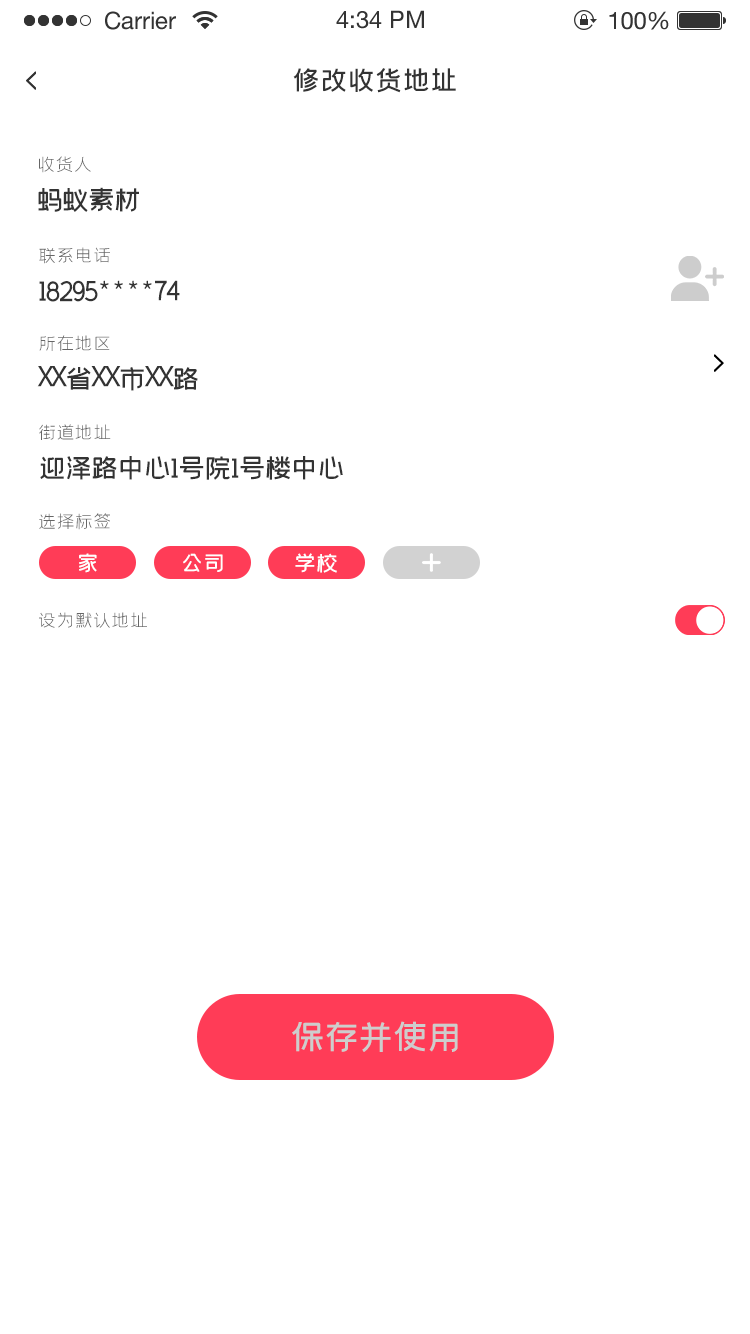
<style>
.page{position:relative;width:750px;height:1334px;background:#ffffff}
.page>*{position:absolute;margin:0}
.t1{font:30px "59--Regular";letter-spacing:-0.08em;color:#333333;text-transform:uppercase}
.t2{font:20px "58--Regular";letter-spacing:-0.08em;color:#666666;text-transform:uppercase}
.t3{font:30px "59--Regular";letter-spacing:-0.14em;color:#333333;text-transform:uppercase}
.t4{font:30px "59--Regular";letter-spacing:-0.12em;color:#333333;text-transform:uppercase}
.t5{font:30px "MyriadPro-Regular";letter-spacing:-0.12em;color:#333333;text-transform:uppercase}
.t6{font:24px "59--Regular";letter-spacing:-0.08em;color:#ffffff;text-transform:uppercase}
.t7{font:38px "59--Regular";letter-spacing:-0.1em;color:#cdcdcd;text-transform:uppercase}
</style>
<div class="page">
<p class="t1" style="left:293px;top:68px;width:163px;height:25px">修改收货地址</p>
<p class="t2" style="left:39px;top:156px;width:52px;height:17px">收货人</p>
<p class="t3" style="left:38px;top:187px;width:101px;height:25px">蚂蚁素材</p>
<p class="t2" style="left:39px;top:247px;width:71px;height:17px">联系电话</p>
<p class="t4" style="left:39px;top:280px;width:141px;height:22px">18295****74</p>
<p class="t2" style="left:39px;top:335px;width:71px;height:16px">所在地区</p>
<p class="t5" style="left:37px;top:366px;width:161px;height:25px">xx<span class="t4">省</span>xx<span class="t4">市</span>xx<span class="t4">路</span></p>
<p class="t2" style="left:39px;top:424px;width:72px;height:16px">街道地址</p>
<p class="t4" style="left:40px;top:456px;width:303px;height:24px">迎泽路中心1号院1号楼中心</p>
<p class="t2" style="left:39px;top:513px;width:71px;height:17px">选择标签</p>
<p class="t6" style="left:79px;top:553px;width:18px;height:20px">家</p>
<p class="t6" style="left:183px;top:553px;width:40px;height:19px">公司</p>
<p class="t6" style="left:295px;top:553px;width:42px;height:20px">学校</p>
<p class="t2" style="left:39px;top:612px;width:108px;height:16px">设为默认地址</p>
<p class="t7" style="left:292px;top:1021px;width:166px;height:31px">保存并使用</p>
</div>
